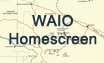
<style>
.page{position:relative;width:104px;height:63px;background:#faf9db}
.page>*{position:absolute;margin:0}
.t1{font:15px/18px "ArialMT";color:#1f3346;font-weight:bold}
</style>
<div class="page">
<p class="t1" style="left:9px;top:14px;width:88px;height:31px;text-align:center">WAIO<br>Homescreen</p>
</div>
